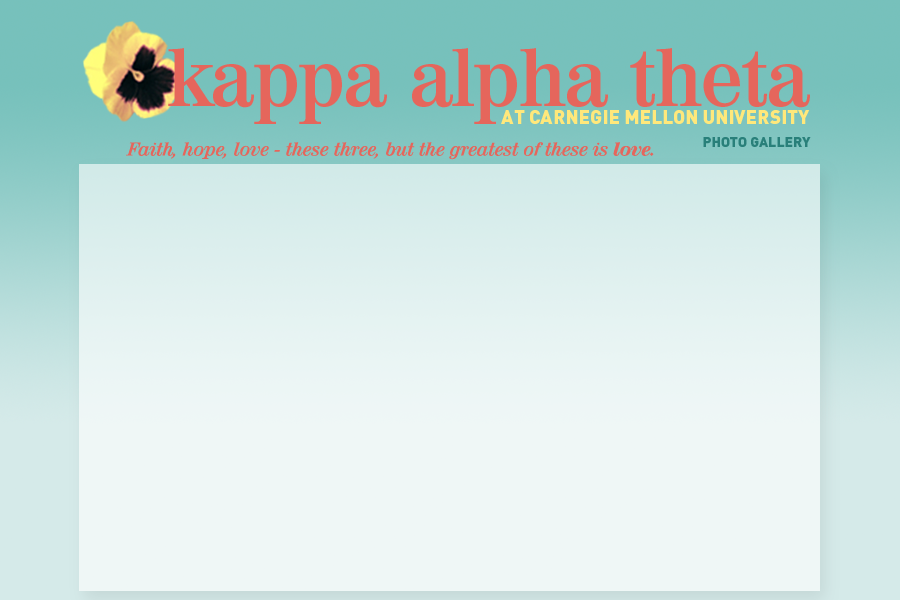
<style>
.page{position:relative;width:900px;height:600px;background:#eff7f6}
.page>*{position:absolute;margin:0}
.t1{font:79.1px "Valencia-DemiBold";color:#e5665c}
.t2{font:19px "DIN-Black";color:#ffe87b}
.t3{font:14px "DIN-Black";color:#29807a}
.t4{font:18px "Valencia-DemiBoldIta";color:#e5665c}
.t5{font:18px "Valencia-ExtraBoldIta";color:#e5665c}
</style>
<div class="page">
<p class="t1" style="left:168px;top:48px;width:642px;height:76px">kappa alpha theta</p>
<p class="t2" style="left:501px;top:110px;width:309px;height:15px">AT CARNEGIE MELLON UNIVERSITY</p>
<p class="t3" style="left:703px;top:137px;width:108px;height:10px">PHOTO GALLERY</p>
<p class="t4" style="left:126px;top:142px;width:528px;height:18px">Faith, hope, love - these three, but the greatest of these is <span class="t5">love.</span></p>
</div>
